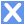
<style>
.page{position:relative;width:25px;height:25px;background:#6495ed}
.page>*{position:absolute;margin:0}
.t1{font:25.8px "ArialRoundedMTBold";color:#ffffff;scale:1.25 1}
</style>
<div class="page">
<p class="t1" style="left:3px;top:3px;width:19px;height:19px">X</p>
</div>
